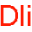
<style>
.page{position:relative;width:32px;height:32px;background:#ffffff}
.page>*{position:absolute;margin:0}
.t1{font:29.2px "MS Sans Serif";color:#ff1d05}
</style>
<div class="page">
<p class="t1" style="left:0px;top:5px;width:31px;height:21px">Dli</p>
</div>
